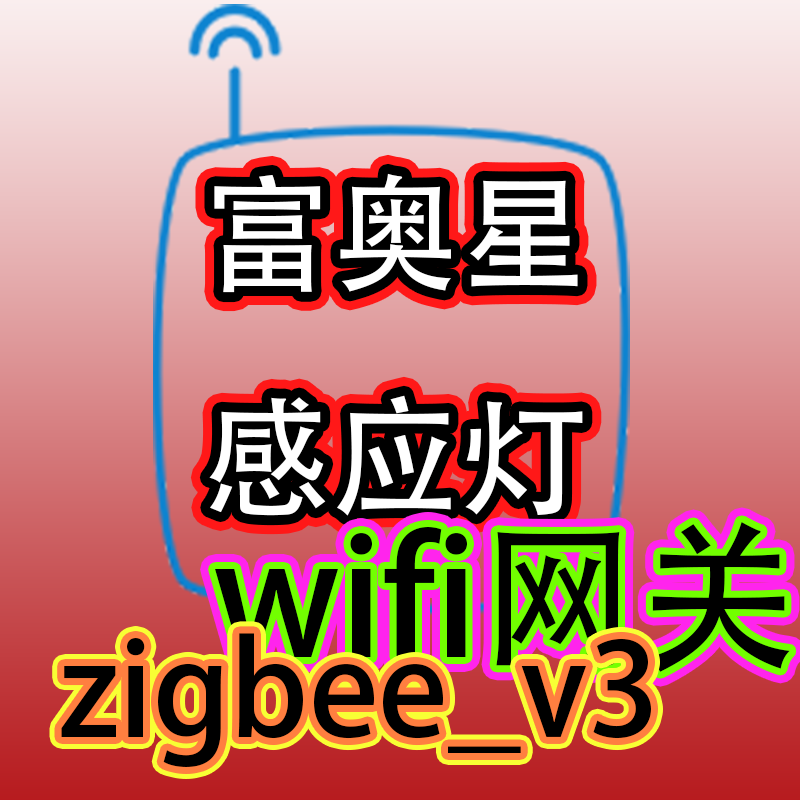
<style>
.page{position:relative;width:800px;height:800px}
.page>*{position:absolute;margin:0}
.t1{font:128px "AdobeHeitiStd-Regular";color:#ffffff}
.t2{font:160px "AdobeHeitiStd-Regular";color:#000000}
.t3{font:128px "AdobeHeitiStd-Regular";color:#000000}
</style>
<div class="page">
<p class="t1" style="left:209px;top:173px;width:374px;height:343px">富奥星<br>感应灯</p>
<p class="t2" style="left:215px;top:522px;width:575px;height:150px">wifi网关</p>
<p class="t3" style="left:61px;top:633px;width:590px;height:134px">zigbee_v3</p>
</div>
